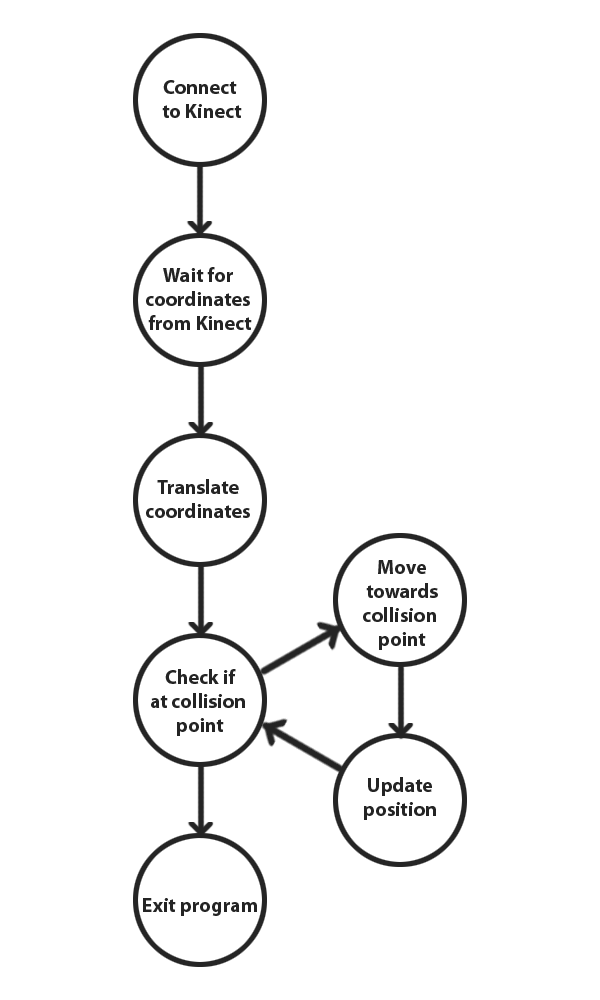
<style>
.page{position:relative;width:600px;height:1000px;background:#ffffff}
.page>*{position:absolute;margin:0}
.t1{font:20px "MyriadPro-Bold";color:#242424}
</style>
<div class="page">
<p class="t1" style="left:162px;top:80px;width:80px;height:38px;text-align:center">Connect <br>to Kinect</p>
<p class="t1" style="left:146px;top:267px;width:106px;height:63px;text-align:center">Wait for <br>coordinates <br>from Kinect</p>
<p class="t1" style="left:146px;top:479px;width:104px;height:39px;text-align:center">Translate<br>coordinates</p>
<p class="t1" style="left:363px;top:560px;width:75px;height:90px;text-align:center">Move<br>towards<br>collision <br>point</p>
<p class="t1" style="left:151px;top:669px;width:94px;height:67px;text-align:center">Check if<br>at collision <br>point</p>
<p class="t1" style="left:364px;top:777px;width:72px;height:43px;text-align:center">Update<br>position</p>
<p class="t1" style="left:143px;top:898px;width:114px;height:18px">Exit program</p>
</div>
